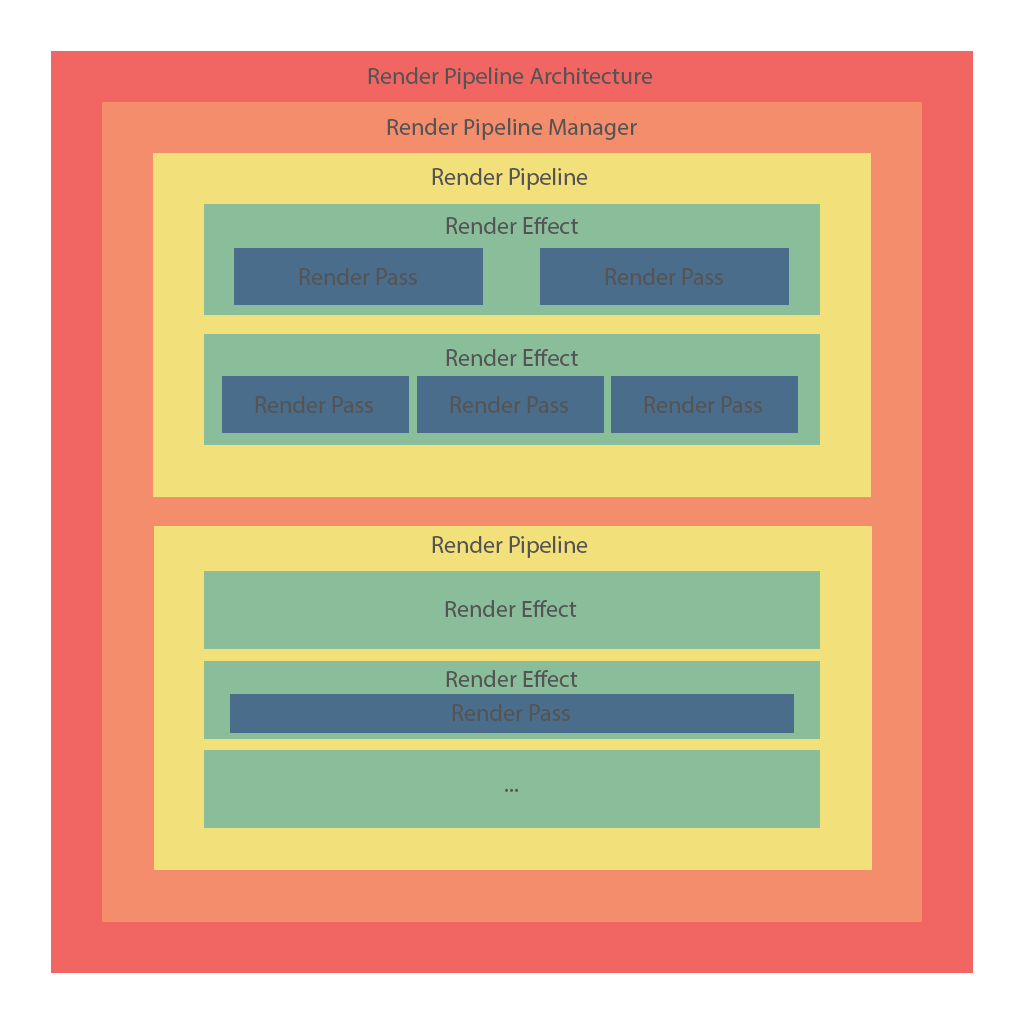
<style>
.page{position:relative;width:1024px;height:1024px;background:#f48d6c}
.page>*{position:absolute;margin:0}
.t1{font:23.9px "MyriadPro-Regular";color:#545454}
.t2{font:24px "MyriadPro-Regular";color:#545454}
</style>
<div class="page">
<p class="t1" style="left:368px;top:67px;width:285px;height:22px">Render Pipeline Architecture</p>
<p class="t1" style="left:387px;top:118px;width:250px;height:22px">Render Pipeline Manager</p>
<p class="t2" style="left:432px;top:168px;width:156px;height:22px">Render Pipeline</p>
<p class="t2" style="left:446px;top:217px;width:132px;height:17px">Render Effect</p>
<p class="t2" style="left:299px;top:268px;width:118px;height:17px">Render Pass</p>
<p class="t2" style="left:605px;top:268px;width:118px;height:17px">Render Pass</p>
<p class="t2" style="left:446px;top:349px;width:132px;height:17px">Render Effect</p>
<p class="t2" style="left:255px;top:396px;width:118px;height:17px">Render Pass</p>
<p class="t2" style="left:450px;top:396px;width:118px;height:17px">Render Pass</p>
<p class="t2" style="left:644px;top:396px;width:118px;height:17px">Render Pass</p>
<p class="t2" style="left:432px;top:536px;width:156px;height:22px">Render Pipeline</p>
<p class="t1" style="left:445px;top:600px;width:132px;height:17px">Render Effect</p>
<p class="t1" style="left:446px;top:670px;width:132px;height:17px">Render Effect</p>
<p class="t2" style="left:452px;top:704px;width:118px;height:17px">Render Pass</p>
<p class="t2" style="left:505px;top:788px;width:14px;height:4px">...</p>
</div>
